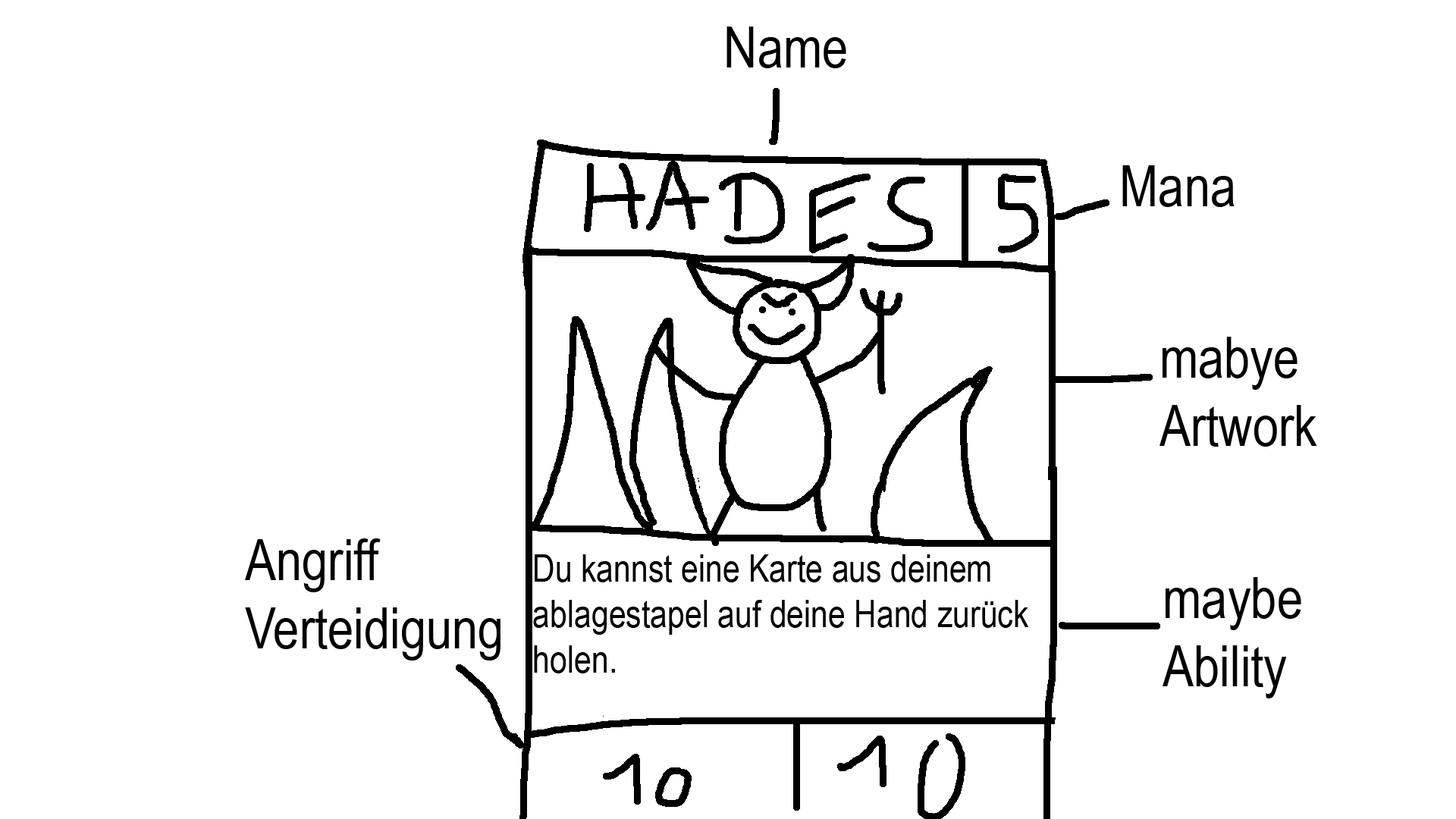
<style>
.page{position:relative;width:1456px;height:819px;background:#ffffff}
.page>*{position:absolute;margin:0}
.t1{font:56.9px "ArialNarrow";color:#000000}
.t2{font:37.9px "ArialNarrow";color:#000000}
</style>
<div class="page">
<p class="t1" style="left:726px;top:27px;width:120px;height:41px">Name</p>
<p class="t1" style="left:1122px;top:165px;width:113px;height:42px">Mana</p>
<p class="t1" style="left:1159px;top:337px;width:158px;height:110px">mabye Artwork</p>
<p class="t1" style="left:245px;top:538px;width:255px;height:122px">Angriff<br>Verteidigung</p>
<p class="t2" style="left:533px;top:554px;width:496px;height:119px">Du kannst eine Karte aus deinem ablagestapel auf deine Hand zurück holen.</p>
<p class="t1" style="left:1163px;top:577px;width:138px;height:121px">maybe <br>Ability</p>
</div>
